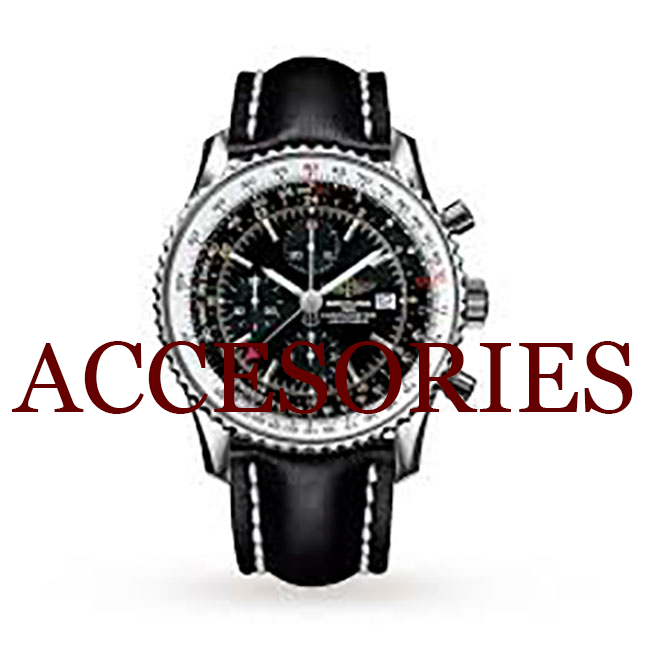
<style>
.page{position:relative;width:650px;height:650px;background:#ffffff}
.page>*{position:absolute;margin:0}
.t1{font:100px "Georgia";color:#650000}
</style>
<div class="page">
<p class="t1" style="left:12px;top:341px;width:621px;height:73px">ACCESORIES</p>
</div>
